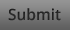
<style>
.page{position:relative;width:70px;height:30px}
.page>*{position:absolute;margin:0}
.t1{font:15.5px "OpenSans-Semibold";color:#1c1c1a}
</style>
<div class="page">
<p class="t1" style="left:8px;top:8px;width:53px;height:13px">Submit</p>
</div>
